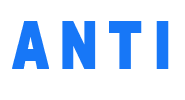
<style>
.page{position:relative;width:185px;height:100px;background:#ffffff}
.page>*{position:absolute;margin:0}
.t1{font:65.1px "Arial-Black";letter-spacing:0.22em;color:#1777f7;font-weight:bold;scale:0.7 1}
</style>
<div class="page">
<p class="t1" style="left:12px;top:21px;width:157px;height:48px">ANTI</p>
</div>
